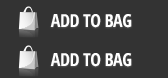
<style>
.page{position:relative;width:168px;height:78px;background:#333333}
.page>*{position:absolute;margin:0}
.t1{font:18px "OpenSans-CondensedBold";letter-spacing:-0.025em;color:#ffffff;text-transform:uppercase}
</style>
<div class="page">
<p class="t1" style="left:50px;top:14px;width:82px;height:14px">Add to Bag</p>
<p class="t1" style="left:50px;top:53px;width:82px;height:14px">Add to Bag</p>
</div>
